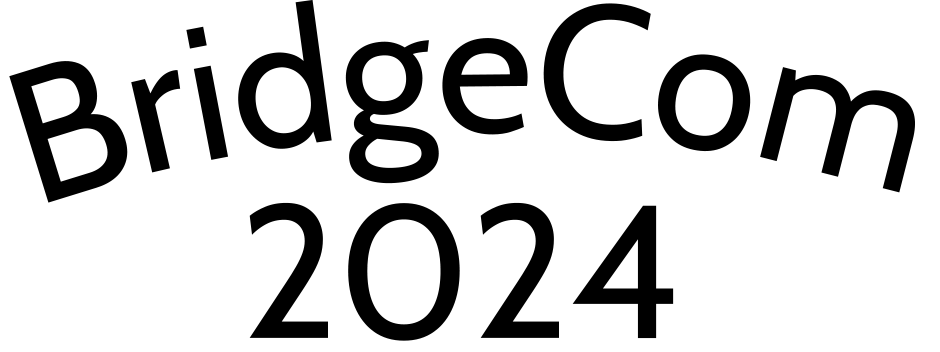
<style>
.page{position:relative;width:940px;height:352px;background:#ffffff}
.page>*{position:absolute;margin:0}
.t1{font:188.9px "Cabin-Regular";color:#000000}
</style>
<div class="page">
<p class="t1" style="left:9px;top:0px;width:906px;height:203px">BridgeCom</p>
<p class="t1" style="left:249px;top:202px;width:425px;height:139px">2024</p>
</div>
